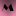
<style>
.page{position:relative;width:16px;height:16px}
.page>*{position:absolute;margin:0}
.t1{font:10.7px "Broadway";color:#000000;scale:1.17 1}
</style>
<div class="page">
<p class="t1" style="left:2px;top:3px;width:12px;height:8px">M</p>
</div>
